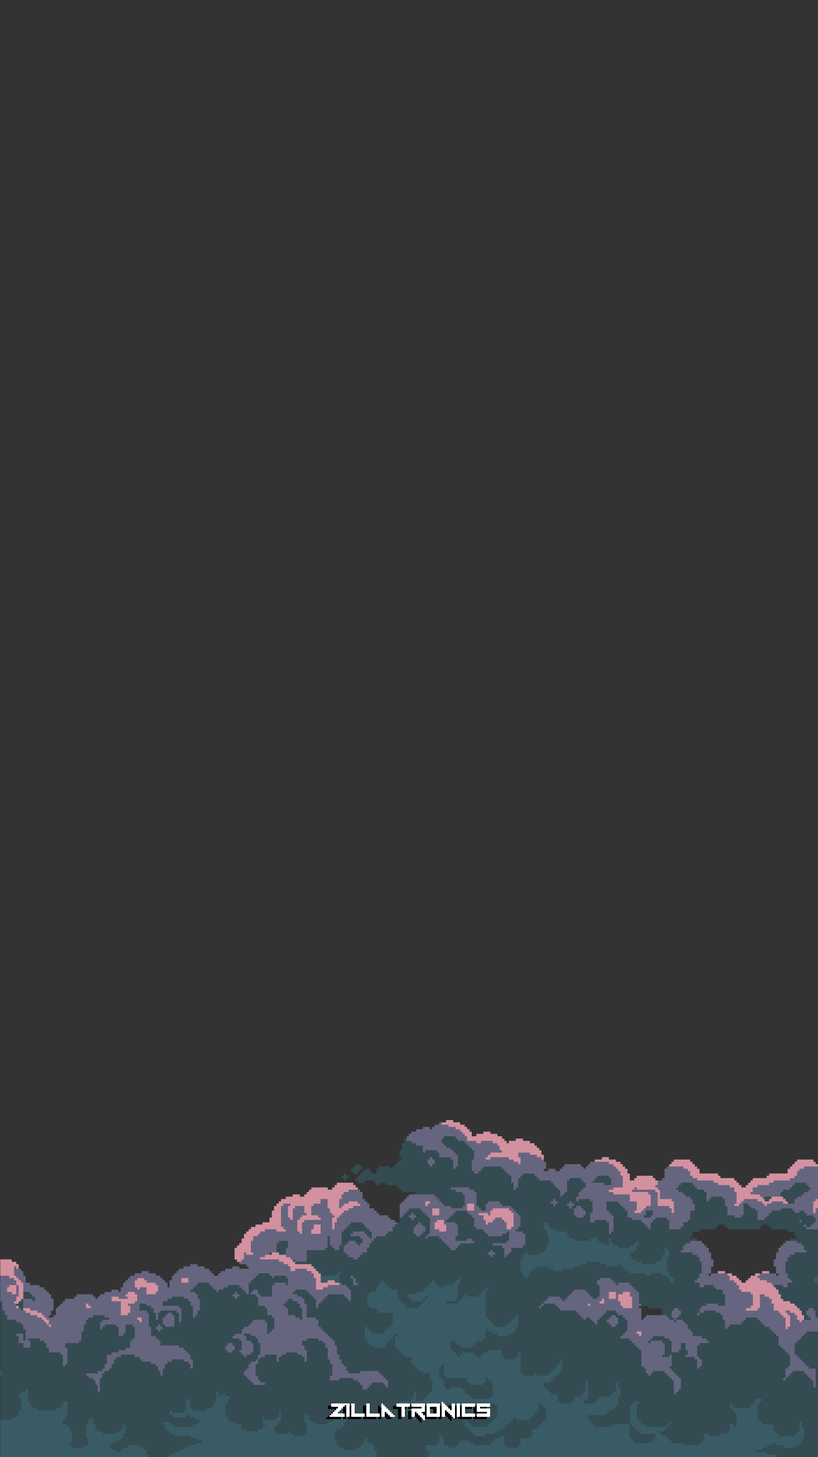
<style>
.page{position:relative;width:818px;height:1457px;background:#333333}
.page>*{position:absolute;margin:0}
.t1{font:26.8px "Vermin-Vibes-1989";color:#ffffff}
</style>
<div class="page">
<p class="t1" style="left:330px;top:1402px;width:160px;height:18px">Zillatronics</p>
</div>
